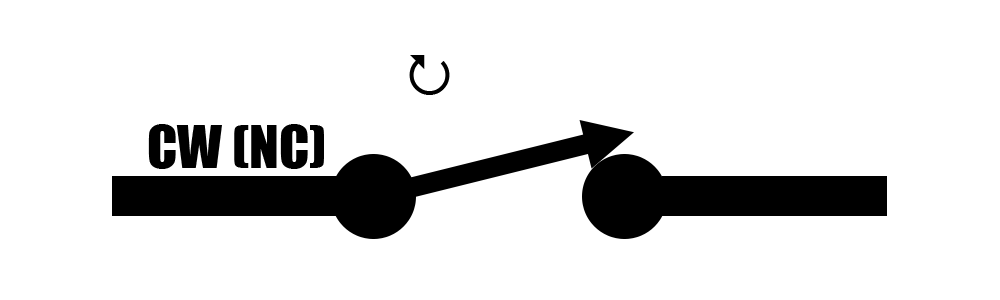
<style>
.page{position:relative;width:1000px;height:300px;background:#ffffff}
.page>*{position:absolute;margin:0}
.t1{font:55px "Impact";color:#000000}
</style>
<div class="page">
<p class="t1" style="left:148px;top:124px;width:176px;height:45px">CW (NC)</p>
</div>
